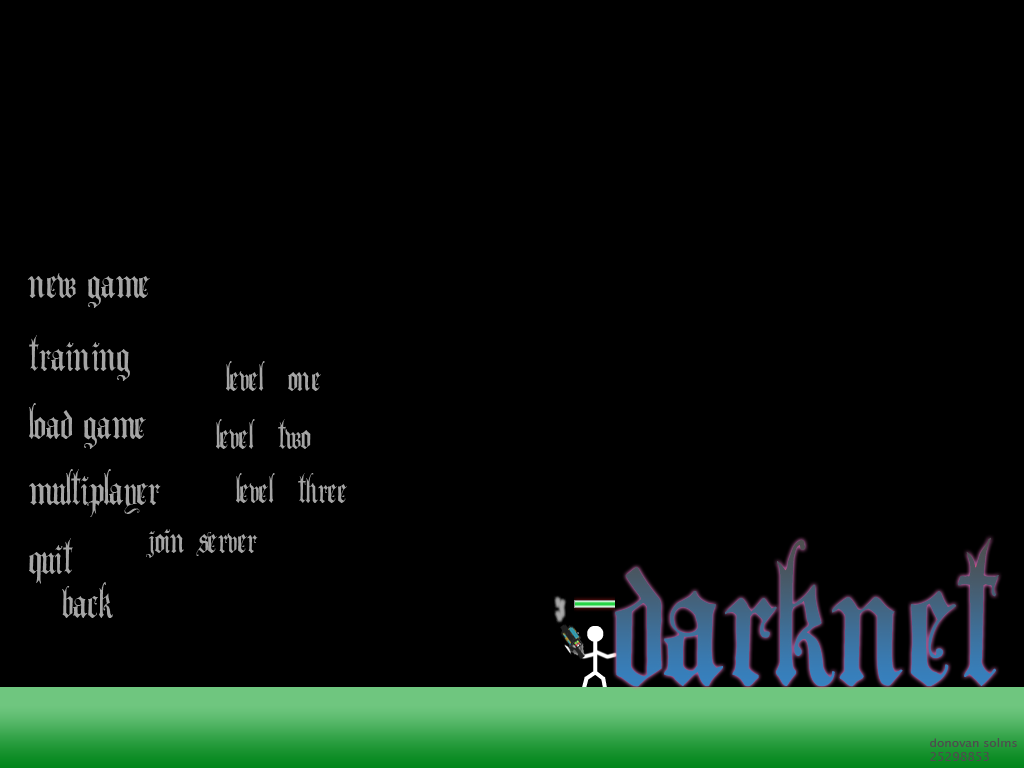
<style>
.page{position:relative;width:1024px;height:768px;background:#000000}
.page>*{position:absolute;margin:0}
.t1{font:60px "AngloText";color:#a5a5a5}
.t2{font:50px "AngloText";color:#a5a5a5}
.t3{font:250px "AngloText"}
.t4{font:12px "AquaBase";color:#4d4d4d}
</style>
<div class="page">
<p class="t1" style="left:27px;top:273px;width:123px;height:35px">new game</p>
<p class="t1" style="left:29px;top:335px;width:101px;height:46px">training</p>
<p class="t2" style="left:226px;top:361px;width:95px;height:30px">level one</p>
<p class="t1" style="left:29px;top:403px;width:117px;height:46px">load game</p>
<p class="t2" style="left:216px;top:419px;width:95px;height:30px">level two</p>
<p class="t1" style="left:29px;top:469px;width:132px;height:48px">multiplayer</p>
<p class="t2" style="left:236px;top:473px;width:111px;height:30px">level three</p>
<p class="t2" style="left:146px;top:529px;width:112px;height:29px">join server</p>
<p class="t1" style="left:29px;top:538px;width:44px;height:46px">quit</p>
<p class="t3" style="left:615px;top:537px;width:384px;height:150px">darknet</p>
<p class="t1" style="left:62px;top:582px;width:51px;height:36px">back</p>
<p class="t4" style="left:930px;top:738px;width:87px;height:23px">donovan solms<br>25298853</p>
</div>
